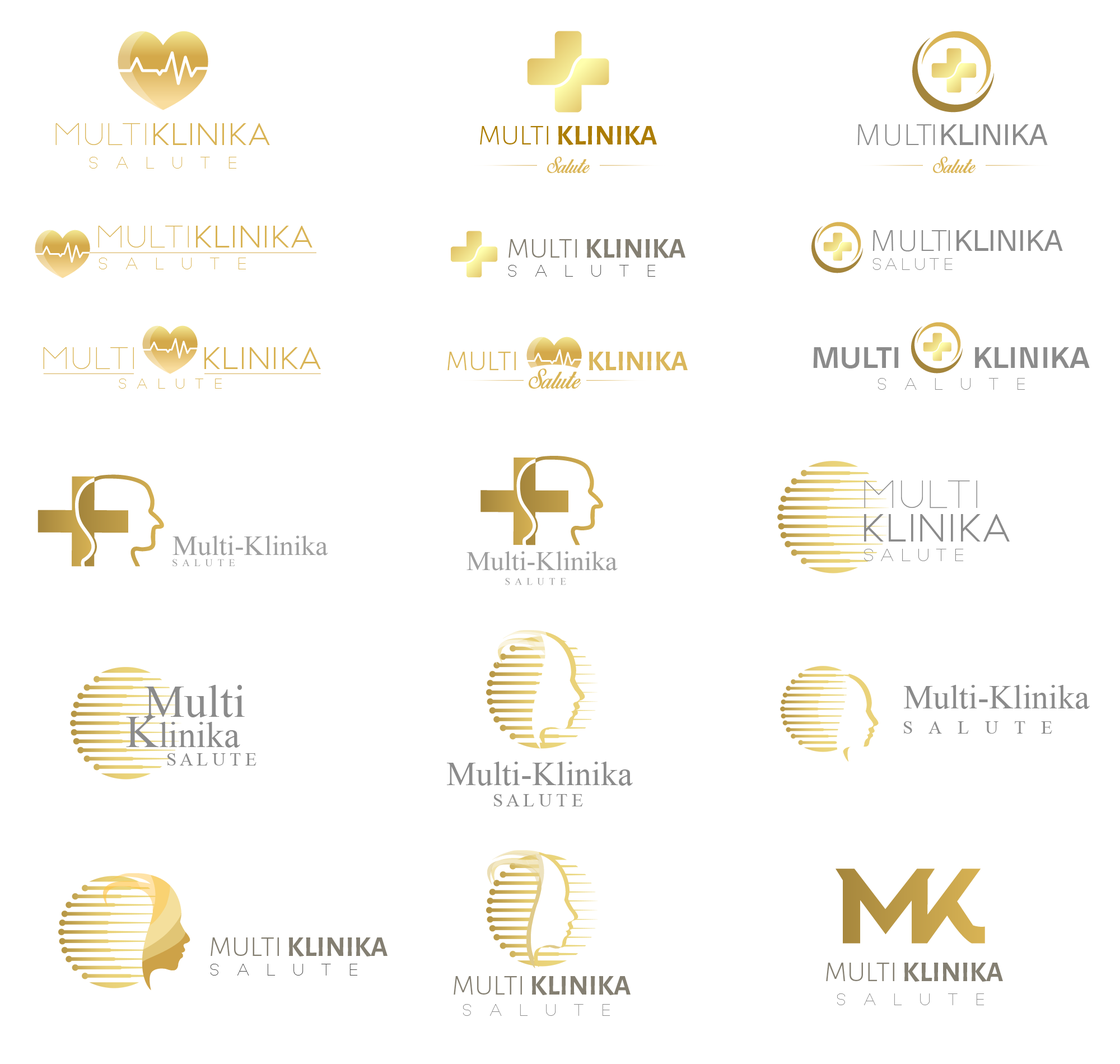
<style>
.page{position:relative;width:1120px;height:1064px;background:#ffffff}
.page>*{position:absolute;margin:0}
.t1{font:29.1px "BigJohnPRO-Regular";color:#d9b456}
.t2{font:29.1px "BigJohnPRO-Light";color:#d9b456}
.t3{font:29.1px "AnalogueReduced-Regular";color:#8b8b8b}
.t4{font:29.1px "AnalogueReduced-Thin";color:#8b8b8b}
.t5{font:29.1px "AlegreyaSans-Bold";color:#ac7d04}
.t6{font:29.1px "AlegreyaSans-Light";color:#ac7d04}
.t7{font:15.7px "BigJohnPRO-Light";color:#d9b456}
.t8{font:19.6px "BirdsofParadise";color:#d9b456}
.t9{font:29.1px "AlegreyaSans-Bold";color:#847f72}
.t10{font:29.1px "AlegreyaSans-Light";color:#847f72}
.t11{font:15.7px "BigJohnPRO-Light";color:#484848}
.t12{font:15.7px "BigJohnPRO-Light";letter-spacing:0.2em;color:#8b8b8b}
.t13{font:29.1px "AlegreyaSans-Bold";color:#dab75c}
.t14{font:29.1px "AlegreyaSans-Light";color:#dab75c}
.t15{font:29.1px "AnalogueReduced-Medium";color:#8b8b8b}
.t16{font:24.1px "BirdsofParadise";color:#d9b456}
.t17{font:13.4px "BigJohnPRO-Light";color:#d9b456}
.t18{font:15.7px "BigJohnPRO-Light";color:#8b8b8b}
.t19{font:36.4px/33.6px "BigJohnPRO-Regular";color:#8b8b8b}
.t20{font:36.4px/33.6px "BigJohnPRO-Light";color:#8b8b8b}
.t21{font:16.8px "BigJohnPRO-Light";color:#8b8b8b}
.t22{font:45.9px "TimesNewRomanPSMT";color:#8b8b8b}
.t23{font:33.6px "TimesNewRomanPSMT";color:#8b8b8b}
.t24{font:35.8px "TimesNewRomanPSMT";color:#8b8b8b}
.t25{font:18.5px "TimesNewRomanPSMT";letter-spacing:0.86em;color:#8b8b8b}
.t26{font:18.5px "TimesNewRomanPSMT";color:#8b8b8b}
</style>
<div class="page">
<p class="t1" style="left:55px;top:123px;width:215px;height:22px"><span class="t2">MULTI</span>KLINIKA</p>
<p class="t3" style="left:858px;top:124px;width:190px;height:22px"><span class="t4">MULTI</span>KLINIKA</p>
<p class="t5" style="left:480px;top:126px;width:177px;height:19px"><span class="t6">MULTI </span>KLINIKA</p>
<p class="t7" style="left:89px;top:157px;width:148px;height:12px">S   A   L   U   T   E</p>
<p class="t8" style="left:547px;top:156px;width:43px;height:17px">Salute</p>
<p class="t8" style="left:933px;top:156px;width:43px;height:17px">Salute</p>
<p class="t1" style="left:98px;top:226px;width:215px;height:22px"><span class="t2">MULTI</span>KLINIKA</p>
<p class="t3" style="left:873px;top:230px;width:190px;height:22px"><span class="t4">MULTI</span>KLINIKA</p>
<p class="t9" style="left:509px;top:239px;width:177px;height:19px"><span class="t10">MULTI </span>KLINIKA</p>
<p class="t7" style="left:99px;top:258px;width:147px;height:11px">S   A   L   U   T   E</p>
<p class="t11" style="left:508px;top:265px;width:148px;height:12px">S   A   L   U   T   E</p>
<p class="t12" style="left:873px;top:258px;width:80px;height:12px">SALUTE</p>
<p class="t1" style="left:43px;top:347px;width:278px;height:22px"><span class="t2">MULTI    </span>KLINIKA</p>
<p class="t13" style="left:448px;top:352px;width:240px;height:19px"><span class="t14">MULTI     </span>KLINIKA</p>
<p class="t15" style="left:813px;top:347px;width:277px;height:22px">MULTI     KLINIKA</p>
<p class="t16" style="left:529px;top:369px;width:52px;height:20px">Salute</p>
<p class="t17" style="left:119px;top:379px;width:103px;height:10px">S  A  L  U  T  E</p>
<p class="t18" style="left:878px;top:378px;width:148px;height:12px">S   A   L   U   T   E</p>
<p class="t19" style="left:864px;top:481px;width:146px;height:61px"><span class="t20">MULTI <br></span>KLINIKA</p>
<p class="t21" style="left:864px;top:549px;width:100px;height:12px">S A L U T E</p>
<p class="t22" style="left:145px;top:685px;width:100px;height:33px">Multi</p>
<p class="t23" style="left:904px;top:685px;width:186px;height:24px">Multi-Klinika</p>
<p class="t24" style="left:126px;top:717px;width:114px;height:31px"><span class="t22">K</span>linika</p>
<p class="t25" style="left:904px;top:722px;width:149px;height:12px">SALUTE</p>
<p class="t26" style="left:167px;top:753px;width:90px;height:13px">S A L U T E</p>
<p class="t23" style="left:447px;top:762px;width:186px;height:24px">Multi-Klinika</p>
<p class="t26" style="left:494px;top:794px;width:89px;height:13px">S A L U T E</p>
<p class="t9" style="left:211px;top:938px;width:177px;height:19px"><span class="t10">MULTI </span>KLINIKA</p>
<p class="t11" style="left:210px;top:964px;width:148px;height:12px">S   A   L   U   T   E</p>
<p class="t9" style="left:826px;top:963px;width:177px;height:19px"><span class="t10">MULTI </span>KLINIKA</p>
<p class="t9" style="left:454px;top:976px;width:177px;height:19px"><span class="t10">MULTI </span>KLINIKA</p>
<p class="t18" style="left:837px;top:994px;width:148px;height:12px">S   A   L   U   T   E</p>
<p class="t18" style="left:463px;top:1004px;width:148px;height:12px">S   A   L   U   T   E</p>
</div>
